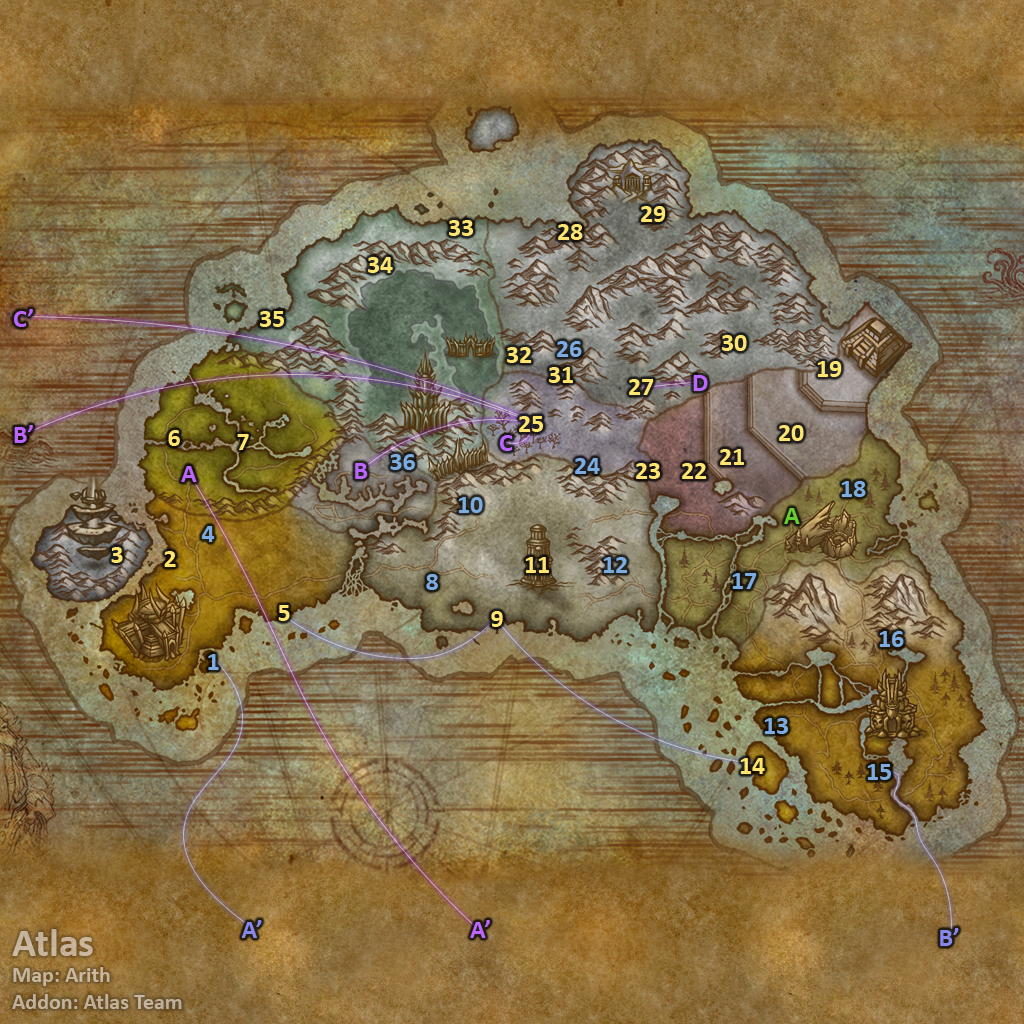
<style>
.page{position:relative;width:1024px;height:1024px}
.page>*{position:absolute;margin:0}
.t1{font:26px "Calibri-Bold";color:#fee570}
.t2{font:26px "Calibri-Bold";color:#bb66ff}
.t3{font:26px "Calibri-Bold";color:#7babe0}
.t4{font:26px "Calibri-Bold";color:#66cc33}
.t5{font:22px "Calibri-Bold";color:#c4b39b}
.t6{font:40px "Calibri-Bold";color:#c4b39b}
.t7{font:26px "Calibri-Bold";color:#8788ee}
</style>
<div class="page">
<p class="t1" style="left:641px;top:206px;width:25px;height:16px">29</p>
<p class="t1" style="left:449px;top:220px;width:24px;height:16px">33</p>
<p class="t1" style="left:558px;top:224px;width:25px;height:16px">28</p>
<p class="t1" style="left:368px;top:257px;width:25px;height:16px">34</p>
<p class="t2" style="left:14px;top:309px;width:19px;height:18px">C’</p>
<p class="t1" style="left:260px;top:311px;width:24px;height:16px">35</p>
<p class="t3" style="left:557px;top:341px;width:25px;height:16px">26</p>
<p class="t1" style="left:722px;top:335px;width:25px;height:16px">30</p>
<p class="t1" style="left:507px;top:347px;width:25px;height:16px">32</p>
<p class="t1" style="left:817px;top:361px;width:25px;height:16px">19</p>
<p class="t1" style="left:549px;top:367px;width:24px;height:16px">31</p>
<p class="t2" style="left:693px;top:375px;width:15px;height:16px">D</p>
<p class="t1" style="left:629px;top:379px;width:25px;height:16px">27</p>
<p class="t2" style="left:14px;top:425px;width:19px;height:18px">B’</p>
<p class="t1" style="left:519px;top:416px;width:24px;height:16px">25</p>
<p class="t1" style="left:779px;top:425px;width:25px;height:16px">20</p>
<p class="t1" style="left:168px;top:430px;width:12px;height:16px">6</p>
<p class="t1" style="left:237px;top:434px;width:12px;height:16px">7</p>
<p class="t2" style="left:500px;top:435px;width:13px;height:16px">C</p>
<p class="t1" style="left:720px;top:449px;width:24px;height:16px">21</p>
<p class="t3" style="left:390px;top:454px;width:25px;height:16px">36</p>
<p class="t3" style="left:575px;top:458px;width:25px;height:16px">24</p>
<p class="t2" style="left:181px;top:466px;width:16px;height:16px">A</p>
<p class="t2" style="left:355px;top:463px;width:13px;height:16px">B</p>
<p class="t1" style="left:636px;top:463px;width:24px;height:16px">23</p>
<p class="t1" style="left:682px;top:463px;width:25px;height:16px">22</p>
<p class="t3" style="left:841px;top:481px;width:25px;height:16px">18</p>
<p class="t3" style="left:458px;top:497px;width:25px;height:16px">10</p>
<p class="t4" style="left:784px;top:508px;width:16px;height:16px">A</p>
<p class="t3" style="left:201px;top:526px;width:14px;height:16px">4</p>
<p class="t1" style="left:111px;top:547px;width:12px;height:16px">3</p>
<p class="t1" style="left:164px;top:551px;width:12px;height:16px">2</p>
<p class="t1" style="left:525px;top:557px;width:24px;height:16px">11</p>
<p class="t3" style="left:603px;top:557px;width:25px;height:16px">12</p>
<p class="t3" style="left:426px;top:574px;width:12px;height:16px">8</p>
<p class="t3" style="left:732px;top:573px;width:25px;height:16px">17</p>
<p class="t1" style="left:278px;top:605px;width:12px;height:16px">5</p>
<p class="t1" style="left:491px;top:611px;width:12px;height:16px">9</p>
<p class="t3" style="left:879px;top:631px;width:25px;height:16px">16</p>
<p class="t3" style="left:208px;top:654px;width:11px;height:16px">1</p>
<p class="t3" style="left:764px;top:718px;width:24px;height:16px">13</p>
<p class="t1" style="left:740px;top:758px;width:25px;height:16px">14</p>
<p class="t3" style="left:867px;top:764px;width:24px;height:16px">15</p>
<p class="t5" style="left:12px;top:929px;width:170px;height:80px"><span class="t6">Atlas<br></span>Map: Arith<br>Addon: Atlas Team</p>
<p class="t7" style="left:241px;top:920px;width:21px;height:18px">A’</p>
<p class="t2" style="left:470px;top:920px;width:20px;height:18px">A’</p>
<p class="t7" style="left:940px;top:928px;width:19px;height:18px">B’</p>
</div>
